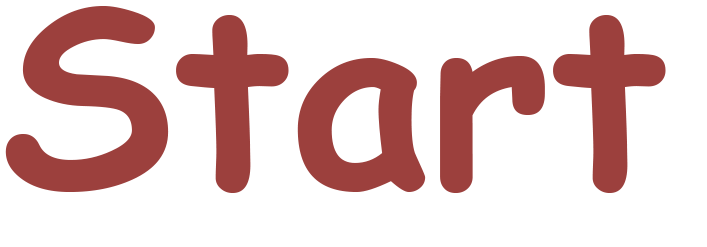
<style>
.page{position:relative;width:707px;height:247px;background:#ffffff}
.page>*{position:absolute;margin:0}
.t1{font:250px "ComicSansMS-Bold";color:#9c403d}
</style>
<div class="page">
<p class="t1" style="left:5px;top:6px;width:661px;height:187px">Start</p>
</div>
